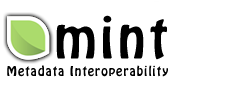
<style>
.page{position:relative;width:241px;height:85px;background:#ffffff}
.page>*{position:absolute;margin:0}
.t1{font:50px "HoboStd";letter-spacing:0.08em;color:#000000}
.t2{font:12px "HoboStd";letter-spacing:0.085em;color:#000000}
</style>
<div class="page">
<p class="t1" style="left:56px;top:15px;width:111px;height:45px">mint</p>
<p class="t2" style="left:7px;top:65px;width:161px;height:12px">Metadata Interoperability</p>
</div>
